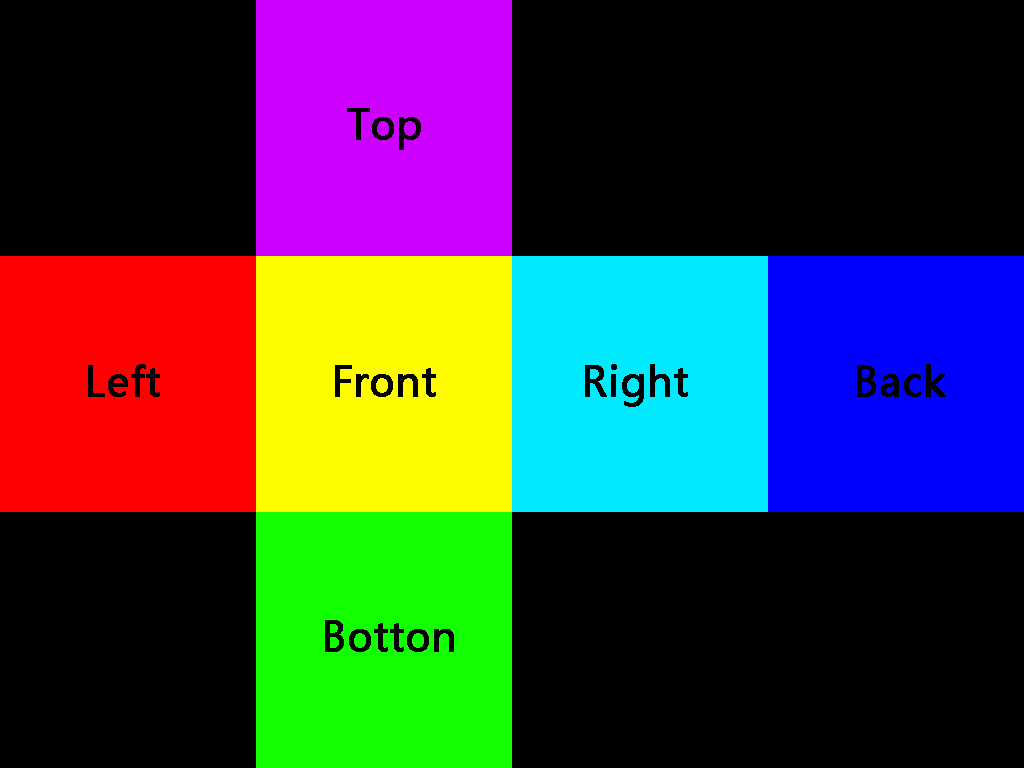
<style>
.page{position:relative;width:1024px;height:768px;background:#000000}
.page>*{position:absolute;margin:0}
.t1{font:40px "MicrosoftYaHei";color:#000000;font-weight:bold}
</style>
<div class="page">
<p class="t1" style="left:347px;top:108px;width:74px;height:42px">Top</p>
<p class="t1" style="left:88px;top:364px;width:72px;height:33px">Left</p>
<p class="t1" style="left:335px;top:365px;width:101px;height:32px">Front</p>
<p class="t1" style="left:585px;top:364px;width:103px;height:43px">Right</p>
<p class="t1" style="left:857px;top:364px;width:89px;height:33px">Back</p>
<p class="t1" style="left:325px;top:620px;width:129px;height:32px">Botton</p>
</div>
